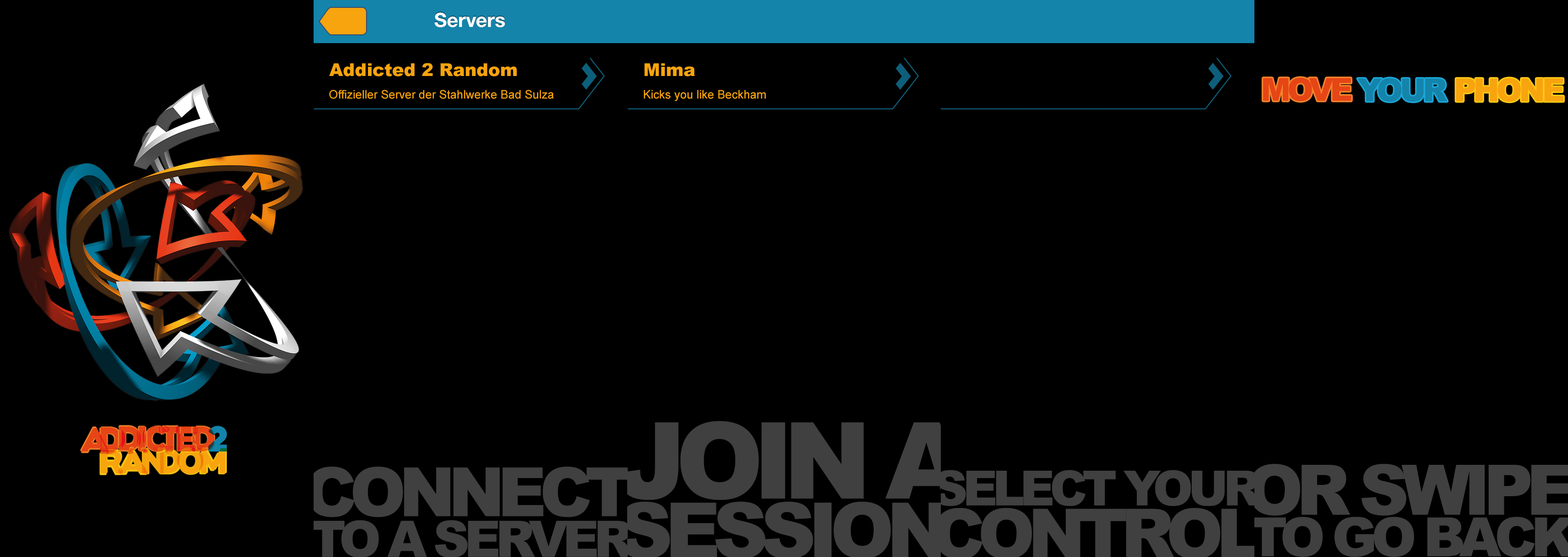
<style>
.page{position:relative;width:1568px;height:557px;background:#000000}
.page>*{position:absolute;margin:0}
.t1{font:19.6px "HelveticaNeue-Bold";color:#ffffff}
.t2{font:17.6px "Arial-Black";color:#f7a40e}
.t3{font:31.6px "Arial-Black";letter-spacing:-0.1em;color:#e64516;text-transform:uppercase}
.t4{font:31.6px "Arial-Black";letter-spacing:-0.1em;color:#1484ab;text-transform:uppercase}
.t5{font:31.6px "Arial-Black";letter-spacing:-0.1em;color:#f7a40e;text-transform:uppercase}
.t6{font:11.8px "ArialMT";color:#f7a40e}
.t7{font:106px "Arial-Black";letter-spacing:-0.1em;color:#404040;text-transform:uppercase}
.t8{font:67.7px "Arial-Black";letter-spacing:-0.1em;color:#404040;text-transform:uppercase}
.t9{font:48.4px "Arial-Black";letter-spacing:-0.1em;color:#404040;text-transform:uppercase}
.t10{font:50.1px "Arial-Black";letter-spacing:-0.1em;color:#404040;text-transform:uppercase}
</style>
<div class="page">
<p class="t1" style="left:435px;top:12px;width:70px;height:15px">Servers</p>
<p class="t2" style="left:329px;top:63px;width:188px;height:13px">Addicted 2 Random</p>
<p class="t2" style="left:644px;top:63px;width:51px;height:13px">Mima</p>
<p class="t3" style="left:1263px;top:77px;width:88px;height:24px">Move</p>
<p class="t4" style="left:1357px;top:78px;width:90px;height:24px">Your</p>
<p class="t5" style="left:1456px;top:78px;width:108px;height:24px">Phone</p>
<p class="t6" style="left:329px;top:90px;width:225px;height:9px">Offizieller Server der Stahlwerke Bad Sulza</p>
<p class="t6" style="left:644px;top:90px;width:122px;height:11px">Kicks you like Beckham</p>
<p class="t7" style="left:617px;top:420px;width:351px;height:80px">Join A</p>
<p class="t8" style="left:307px;top:466px;width:325px;height:51px">Connect</p>
<p class="t9" style="left:934px;top:469px;width:327px;height:37px">Select your</p>
<p class="t10" style="left:311px;top:520px;width:322px;height:37px">TO A Server</p>
</div>
